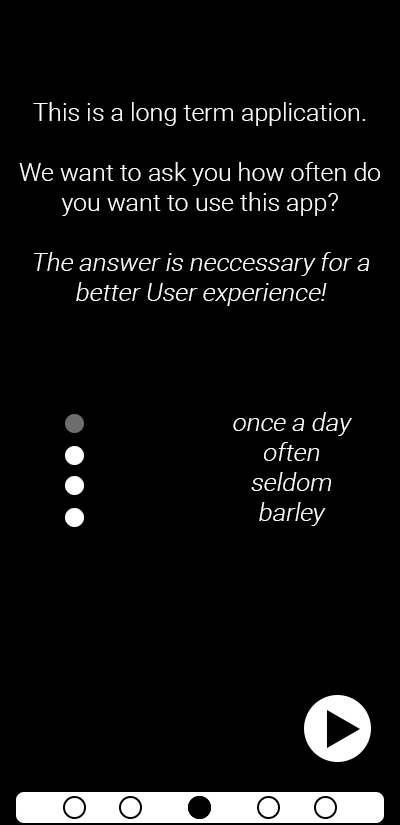
<style>
.page{position:relative;width:400px;height:825px;background:#000000}
.page>*{position:absolute;margin:0}
.t1{font:25px "Roboto-Light";color:#ffffff}
.t2{font:25px "Roboto-Light";color:#ffffff;font-style:italic}
</style>
<div class="page">
<p class="t1" style="left:19px;top:102px;width:361px;height:204px;text-align:center">This is a long term application. <br><br>We want to ask you how often do you want to use this app?<br><br><span class="t2">The answer is neccessary for a better User experience!</span></p>
<p class="t2" style="left:233px;top:412px;width:119px;height:114px;text-align:center">once a day<br>often<br>seldom<br>barley</p>
</div>
